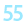
<style>
.page{position:relative;width:26px;height:26px;background:#ffffff}
.page>*{position:absolute;margin:0}
.t1{font:24px "MyriadPro-Semibold";letter-spacing:-0.075em;color:#98e7fe;scale:0.9 1}
</style>
<div class="page">
<p class="t1" style="left:3px;top:5px;width:20px;height:16px">55</p>
</div>
